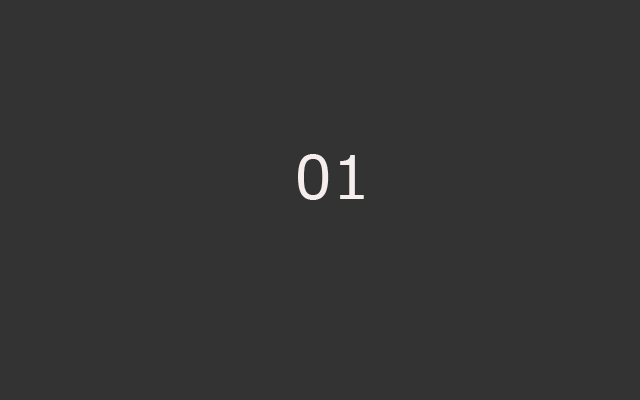
<style>
.page{position:relative;width:640px;height:400px;background:#333333}
.page>*{position:absolute;margin:0}
.t1{font:60px "Verdana";color:#f6eded}
</style>
<div class="page">
<p class="t1" style="left:298px;top:154px;width:66px;height:46px">01</p>
</div>
